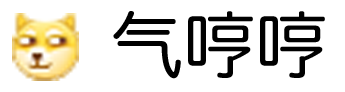
<style>
.page{position:relative;width:345px;height:92px;background:#ffffff}
.page>*{position:absolute;margin:0}
.t1{font:72px "HiraMaruProN-W4";color:#000000}
</style>
<div class="page">
<p class="t1" style="left:113px;top:11px;width:212px;height:68px">气哼哼</p>
</div>
